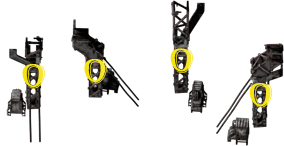
<style>
.page{position:relative;width:284px;height:146px;background:#ffffff}
.page>*{position:absolute;margin:0}
.t1{font:36.1px "Algerian";color:#f6e41e}
.t2{font:36.1px "Algerian";color:#f6e41d}
</style>
<div class="page">
<p class="t1" style="left:170px;top:48px;width:23px;height:25px">O</p>
<p class="t1" style="left:22px;top:64px;width:23px;height:25px">O</p>
<p class="t2" style="left:84px;top:59px;width:23px;height:25px">O</p>
<p class="t2" style="left:249px;top:83px;width:23px;height:25px">O</p>
</div>
